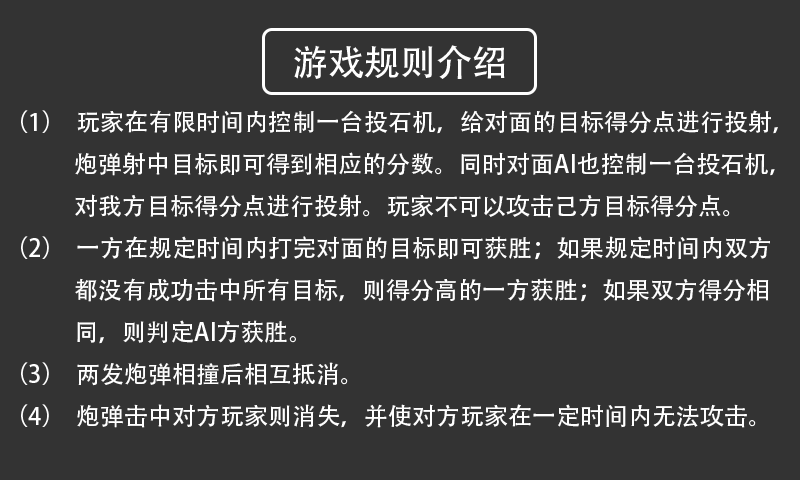
<style>
.page{position:relative;width:800px;height:480px;background:#333333}
.page>*{position:absolute;margin:0}
.t1{font:36px "AdobeHeitiStd-Regular";color:#ffffff}
.t2{font:24px "AdobeHeitiStd-Regular";color:#ffffff}
</style>
<div class="page">
<p class="t1" style="left:294px;top:45px;width:211px;height:34px">游戏规则介绍</p>
<p class="t2" style="left:21px;top:110px;width:757px;height:318px">（1） 玩家在有限时间内控制一台投石机，给对面的目标得分点进行投射，<br>             炮弹射中目标即可得到相应的分数。同时对面AI也控制一台投石机，<br>             对我方目标得分点进行投射。玩家不可以攻击己方目标得分点。<br>（2） 一方在规定时间内打完对面的目标即可获胜；如果规定时间内双方<br>             都没有成功击中所有目标，则得分高的一方获胜；如果双方得分相<br>             同，则判定AI方获胜。<br>（3） 两发炮弹相撞后相互抵消。<br>（4） 炮弹击中对方玩家则消失，并使对方玩家在一定时间内无法攻击。</p>
</div>
